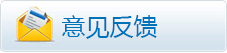
<style>
.page{position:relative;width:227px;height:53px}
.page>*{position:absolute;margin:0}
.t1{font:24px "MicrosoftYaHei";color:#0072b7}
</style>
<div class="page">
<p class="t1" style="left:62px;top:15px;width:96px;height:24px">意见反馈</p>
</div>
